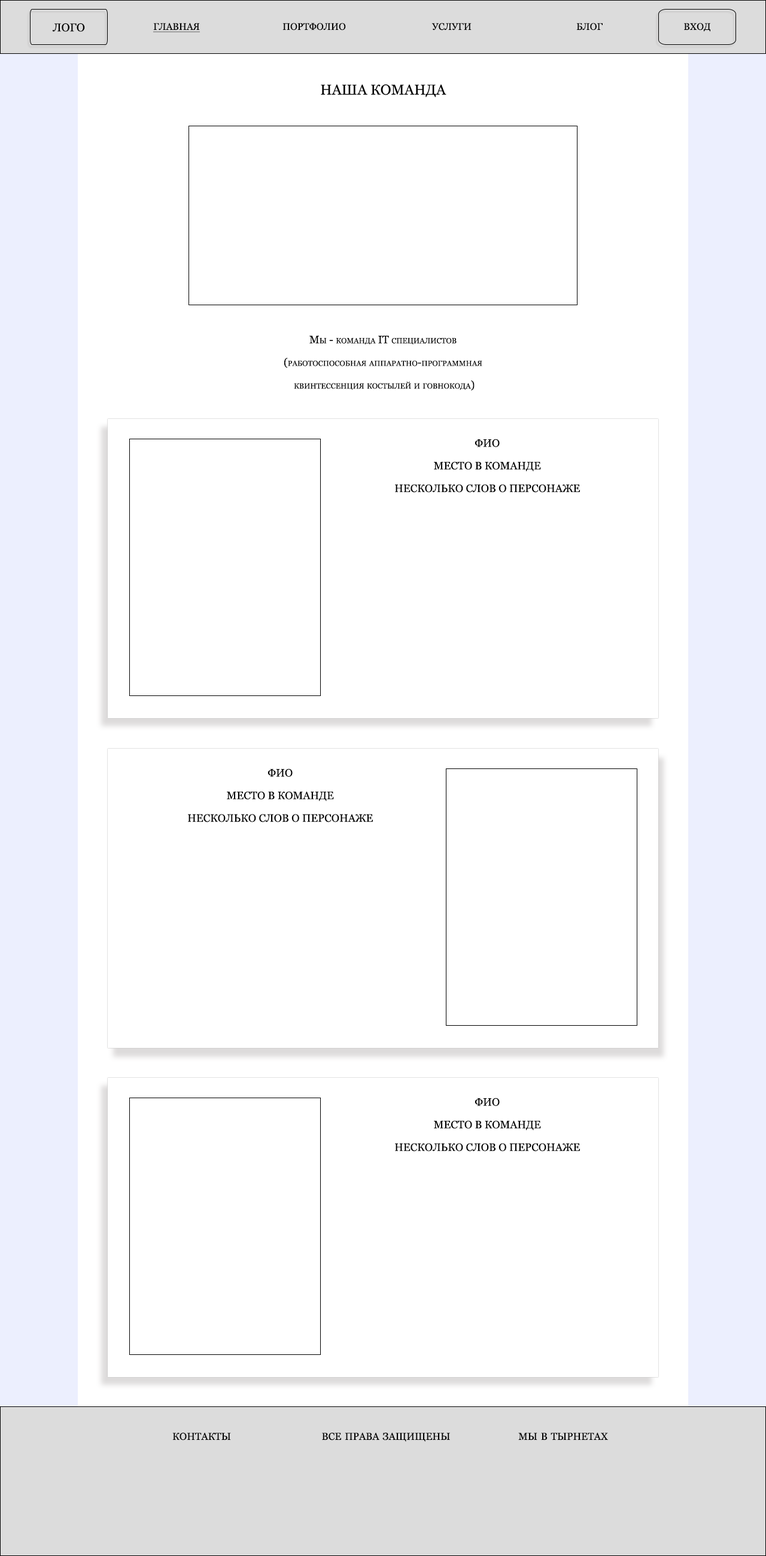
<style>
.page{position:relative;width:766px;height:1556px;background:#ffffff}
.page>*{position:absolute;margin:0}
.t1{font:11.4px "Georgia";color:#000000;font-variant:small-caps}
.t2{font:9.6px "Georgia";color:#000000;font-variant:small-caps}
.t3{font:9.6px "Georgia";color:#000000;font-variant:small-caps;text-decoration:underline}
.t4{font:14.4px "Georgia";color:#000000;font-variant:small-caps}
.t5{font:10.8px/22.7px "Georgia";color:#000000;font-variant:small-caps}
</style>
<div class="page">
<p class="t1" style="left:52px;top:23px;width:33px;height:9px"><span class="t2"><br></span>ЛОГО</p>
<p class="t3" style="left:153px;top:23px;width:47px;height:9px"><span class="t2"><br></span>ГЛАВНАЯ</p>
<p class="t2" style="left:283px;top:23px;width:63px;height:8px">ПОРТФОЛИО</p>
<p class="t2" style="left:432px;top:23px;width:40px;height:8px">УСЛУГИ</p>
<p class="t2" style="left:576px;top:23px;width:27px;height:8px">БЛОГ</p>
<p class="t2" style="left:684px;top:23px;width:27px;height:9px">ВХОД</p>
<p class="t4" style="left:321px;top:84px;width:126px;height:14px">НАША КОМАНДА</p>
<p class="t5" style="left:284px;top:336px;width:198px;height:55px;text-align:center">Мы - команда IT специалистов<br>(работоспособная аппаратно-программная<br> квинтессенция костылей и говнокода)</p>
<p class="t5" style="left:395px;top:439px;width:185px;height:54px;text-align:center">ФИО<br>МЕСТО В КОМАНДЕ<br>НЕСКОЛЬКО СЛОВ О ПЕРСОНАЖЕ</p>
<p class="t5" style="left:188px;top:769px;width:185px;height:53px;text-align:center">ФИО<br>МЕСТО В КОМАНДЕ<br>НЕСКОЛЬКО СЛОВ О ПЕРСОНАЖЕ</p>
<p class="t5" style="left:395px;top:1098px;width:185px;height:54px;text-align:center">ФИО<br>МЕСТО В КОМАНДЕ<br>НЕСКОЛЬКО СЛОВ О ПЕРСОНАЖЕ</p>
<p class="t4" style="left:172px;top:1433px;width:59px;height:8px">контакты</p>
<p class="t4" style="left:322px;top:1433px;width:128px;height:9px">все права защищены</p>
<p class="t4" style="left:518px;top:1433px;width:90px;height:7px">мы в тырнетах</p>
</div>
